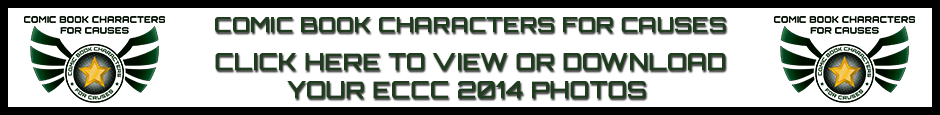
<style>
.page{position:relative;width:940px;height:115px;background:#ffffff}
.page>*{position:absolute;margin:0}
.t1{font:21px "Orbitron-Medium";color:#1f3c1e;text-transform:uppercase;font-weight:bold}
.t2{font:23px "Orbitron-Medium";color:#1f3c1e;text-transform:uppercase;font-weight:bold}
</style>
<div class="page">
<p class="t1" style="left:215px;top:17px;width:511px;height:16px">Comic Book Characters For Causes</p>
<p class="t2" style="left:215px;top:53px;width:511px;height:46px;text-align:center">Click here to view or download<br>your ECCC 2014 photos</p>
</div>
